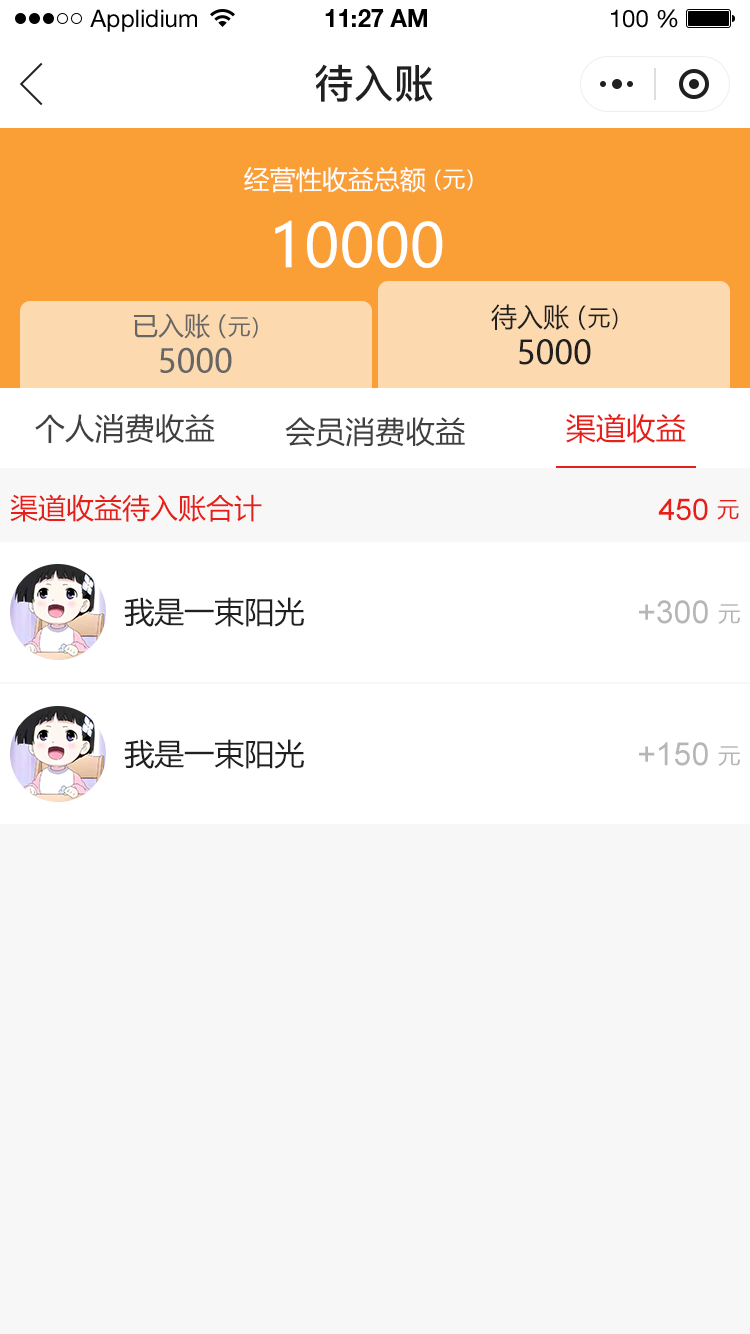
<style>
.page{position:relative;width:750px;height:1334px;background:#f7f7f7}
.page>*{position:absolute;margin:0}
.t1{font:24px "HelveticaNeueLTStd-Roman";color:#000000}
.t2{font:24px "HelveticaNeueLTStd-Bd";color:#000000}
.t3{font:40px "PingFang-SC-Bold";color:#202020;text-transform:uppercase}
.t4{font:26px "MicrosoftYaHei";color:#ffffff;text-transform:uppercase}
.t5{font:22px "MicrosoftYaHei";color:#ffffff;text-transform:uppercase}
.t6{font:60px "MicrosoftYaHei";color:#ffffff;text-transform:uppercase}
.t7{font:26.2px "MicrosoftYaHei";color:#202020;text-transform:uppercase}
.t8{font:22.2px "MicrosoftYaHei";color:#202020;text-transform:uppercase}
.t9{font:26px "MicrosoftYaHei";color:#666666;text-transform:uppercase}
.t10{font:22px "MicrosoftYaHei";color:#666666;text-transform:uppercase}
.t11{font:32.2px "MicrosoftYaHei";color:#202020;text-transform:uppercase}
.t12{font:32px "MicrosoftYaHei";color:#666666;text-transform:uppercase}
.t13{font:30px "MicrosoftYaHei";color:#404040;text-transform:uppercase}
.t14{font:30px "MicrosoftYaHei";color:#e61f18;text-transform:uppercase}
.t15{font:28px "MicrosoftYaHei";color:#e61f18;text-transform:uppercase}
.t16{font:30px "ArialMT";color:#e61f18;text-transform:uppercase}
.t17{font:22px "MicrosoftYaHei";color:#e61f18;text-transform:uppercase}
.t18{font:30px "MicrosoftYaHei";color:#202020;text-transform:uppercase}
.t19{font:32px "ArialMT";color:#b6b6b6;text-transform:uppercase}
.t20{font:22px "MicrosoftYaHei";color:#b6b6b6;text-transform:uppercase}
</style>
<div class="page">
<p class="t1" style="left:90px;top:9px;width:107px;height:23px">Applidium</p>
<p class="t2" style="left:325px;top:9px;width:102px;height:18px">11:27 AM</p>
<p class="t1" style="left:611px;top:9px;width:67px;height:19px">100 %</p>
<p class="t3" style="left:315px;top:64px;width:118px;height:38px">待入账</p>
<p class="t4" style="left:244px;top:167px;width:182px;height:26px">经营性收益总额</p>
<p class="t5" style="left:435px;top:169px;width:38px;height:22px">（元）</p>
<p class="t6" style="left:275px;top:220px;width:168px;height:48px">10000</p>
<p class="t7" style="left:491px;top:304px;width:78px;height:26px">待入账</p>
<p class="t8" style="left:579px;top:305px;width:39px;height:25px"><span class="t7">（</span>元）</p>
<p class="t9" style="left:134px;top:313px;width:76px;height:26px">已入账</p>
<p class="t10" style="left:219px;top:314px;width:39px;height:25px"><span class="t9">（</span>元）</p>
<p class="t11" style="left:519px;top:339px;width:72px;height:26px">5000</p>
<p class="t12" style="left:160px;top:347px;width:72px;height:26px">5000</p>
<p class="t13" style="left:35px;top:414px;width:180px;height:29px">个人消费收益</p>
<p class="t14" style="left:566px;top:413px;width:120px;height:30px">渠道收益</p>
<p class="t13" style="left:285px;top:417px;width:180px;height:30px">会员消费收益</p>
<p class="t15" style="left:10px;top:494px;width:252px;height:28px">渠道收益待入账合计</p>
<p class="t16" style="left:658px;top:498px;width:50px;height:23px">450</p>
<p class="t17" style="left:717px;top:500px;width:22px;height:20px">元</p>
<p class="t18" style="left:124px;top:597px;width:180px;height:30px">我是一束阳光</p>
<p class="t19" style="left:639px;top:600px;width:69px;height:24px">+300</p>
<p class="t20" style="left:718px;top:604px;width:22px;height:20px">元</p>
<p class="t18" style="left:124px;top:739px;width:180px;height:30px">我是一束阳光</p>
<p class="t19" style="left:639px;top:742px;width:69px;height:24px">+150</p>
<p class="t20" style="left:718px;top:746px;width:22px;height:20px">元</p>
</div>
